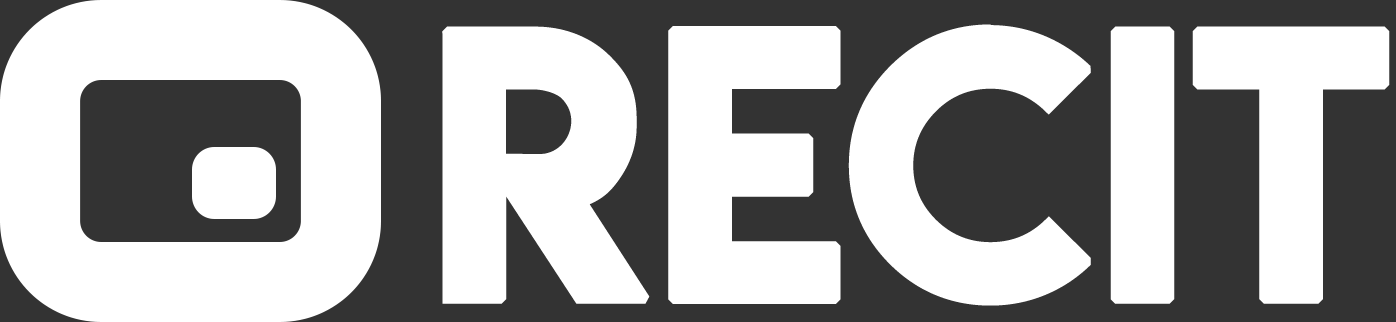
<style>
.page{position:relative;width:1396px;height:322px;background:#ffffff}
.page>*{position:absolute;margin:0}
.t1{font:339.9px "LemonMilk";color:#ffffff;font-weight:bold}
</style>
<div class="page">
<p class="t1" style="left:442px;top:24px;width:948px;height:282px">RECIT</p>
</div>
